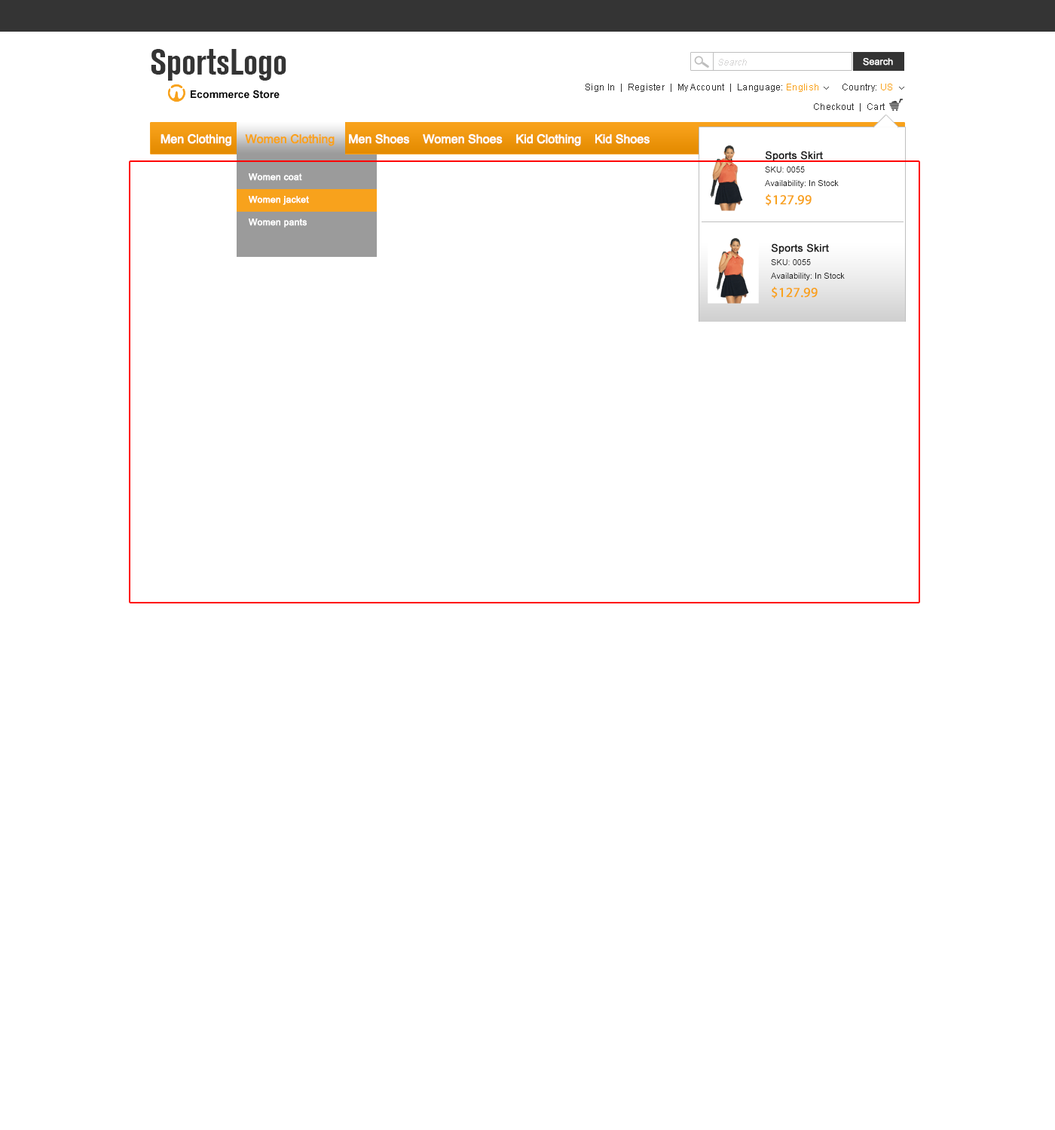
<style>
.page{position:relative;width:1055px;height:1130px;background:#ffffff}
.page>*{position:absolute;margin:0}
.t1{font:36.2px "AkzidenzGroteskBE-BoldCn";color:#343434}
.t2{font:9px "ArialMT";color:#d8d7d7;font-style:italic}
.t3{font:9px "ArialMT";color:#ffffff;font-weight:bold}
.t4{font:10.5px "Arial-BoldMT";color:#000000}
.t5{font:9px "ArialMT";letter-spacing:0.025em;color:#343434}
.t6{font:9px "ArialMT";letter-spacing:0.025em;color:#f8a21c}
.t7{font:12.1px "ArialMT";letter-spacing:-0.025em;color:#fefefe;font-weight:bold}
.t8{font:12.1px "ArialMT";letter-spacing:-0.025em;color:#f8a21c;font-weight:bold}
.t9{font:8.3px/13.6px "ArialMT";color:#1d1d1d}
.t10{font:10.5px/13.6px "ArialMT";color:#1d1d1d;font-weight:bold}
.t11{font:13.6px/18.1px "MyriadPro-Regular";color:#f8a21c;font-weight:bold}
.t12{font:9px/22.6px "ArialMT";color:#ffffff;font-weight:bold}
</style>
<div class="page">
<p class="t1" style="left:151px;top:49px;width:135px;height:32px">SportsLogo</p>
<p class="t2" style="left:718px;top:59px;width:29px;height:7px">Search</p>
<p class="t3" style="left:863px;top:58px;width:30px;height:8px">Search</p>
<p class="t4" style="left:191px;top:90px;width:89px;height:9px">Ecommerce Store</p>
<p class="t5" style="left:586px;top:84px;width:306px;height:8px">Sign In  |  Register  |  My Account  |  Language: <span class="t6">English</span>         Country: <span class="t6">US</span></p>
<p class="t5" style="left:814px;top:103px;width:71px;height:9px">Checkout  |  Cart</p>
<p class="t7" style="left:161px;top:134px;width:489px;height:12px">Men Clothing    <span class="t8">Women Clothing  </span>  Men Shoes    Women Shoes    Kid Clothing    Kid Shoes</p>
<p class="t9" style="left:765px;top:151px;width:74px;height:55px"><span class="t10">Sports Skirt<br></span>SKU: 0055<br>Availability: In Stock<br><span class="t11">$127.99</span></p>
<p class="t12" style="left:248px;top:173px;width:61px;height:55px">Women coat<br>Women jacket<br>Women pants</p>
<p class="t9" style="left:771px;top:243px;width:74px;height:55px"><span class="t10">Sports Skirt<br></span>SKU: 0055<br>Availability: In Stock<br><span class="t11">$127.99</span></p>
</div>
